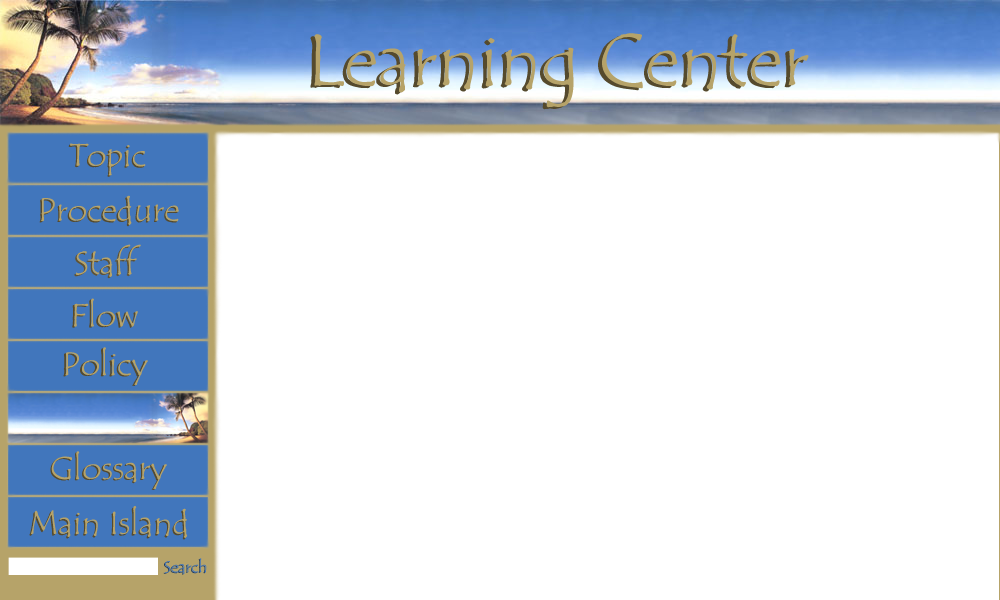
<style>
.page{position:relative;width:1000px;height:600px;background:#ffffff}
.page>*{position:absolute;margin:0}
.t1{font:75px "TempusSansITC";color:#554a2d}
.t2{font:75px "TempusSansITC";color:#b6a369}
.t3{font:33.3px "TempusSansITC"}
.t4{font:33.3px "TempusSansITC";color:#b6a369}
.t5{font:33.3px "TempusSansITC";color:#554a2d}
.t6{font:33.3px "TempusSansITC";color:#605333}
.t7{font:16.7px "TempusSansITC";color:#4176bc}
.t8{font:16.7px "TempusSansITC";color:#223e63}
</style>
<div class="page">
<p class="t1" style="left:310px;top:35px;width:495px;height:75px">Learning Center</p>
<p class="t2" style="left:314px;top:33px;width:495px;height:75px">Learning Center</p>
<p class="t3" style="left:68px;top:144px;width:76px;height:33px">Topic</p>
<p class="t4" style="left:70px;top:143px;width:76px;height:33px">Topic</p>
<p class="t5" style="left:39px;top:197px;width:139px;height:30px">Procedure</p>
<p class="t4" style="left:41px;top:195px;width:138px;height:30px">Procedure</p>
<p class="t6" style="left:74px;top:245px;width:66px;height:34px">Staff</p>
<p class="t4" style="left:76px;top:244px;width:65px;height:33px">Staff</p>
<p class="t5" style="left:72px;top:299px;width:64px;height:29px">Flow</p>
<p class="t4" style="left:74px;top:298px;width:64px;height:29px">Flow</p>
<p class="t5" style="left:63px;top:348px;width:83px;height:38px">Policy</p>
<p class="t4" style="left:65px;top:347px;width:83px;height:38px">Policy</p>
<p class="t5" style="left:50px;top:452px;width:116px;height:38px">Glossary</p>
<p class="t4" style="left:51px;top:451px;width:116px;height:38px">Glossary</p>
<p class="t5" style="left:29px;top:507px;width:157px;height:33px">Main Island</p>
<p class="t4" style="left:30px;top:506px;width:158px;height:32px">Main Island</p>
<p class="t7" style="left:164px;top:558px;width:43px;height:16px">Search</p>
<p class="t8" style="left:163px;top:559px;width:43px;height:16px">Search</p>
</div>
